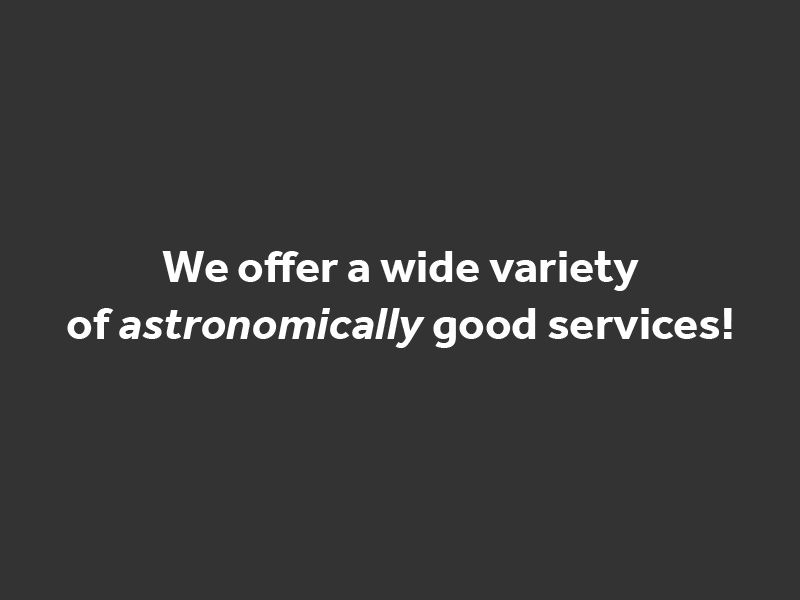
<style>
.page{position:relative;width:800px;height:600px;background:#333333}
.page>*{position:absolute;margin:0}
.t1{font:47.1px "Effra-Bold";color:#ffffff}
.t2{font:47.1px "Effra-BoldItalic";color:#ffffff}
</style>
<div class="page">
<p class="t1" style="left:67px;top:251px;width:665px;height:97px;text-align:center">We offer a wide variety<br>of <span class="t2">astronomically</span> good services!</p>
</div>
